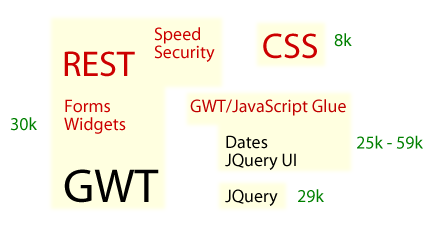
<style>
.page{position:relative;width:431px;height:244px;background:#ffffff}
.page>*{position:absolute;margin:0}
.t1{font:18px "MyriadPro-Regular";color:#cc0000}
.t2{font:36px "MyriadPro-Regular";color:#cc0000}
.t3{font:18px "MyriadPro-Regular";color:#008000}
.t4{font:18px "MyriadPro-Regular";color:#c00000}
.t5{font:18px "MyriadPro-Regular";color:#000000}
.t6{font:48px "MyriadPro-Regular";color:#000000}
</style>
<div class="page">
<p class="t1" style="left:154px;top:27px;width:46px;height:17px">Speed</p>
<p class="t2" style="left:263px;top:33px;width:54px;height:26px">CSS</p>
<p class="t3" style="left:334px;top:33px;width:18px;height:14px">8k</p>
<p class="t2" style="left:64px;top:51px;width:71px;height:26px">REST</p>
<p class="t1" style="left:154px;top:45px;width:61px;height:17px">Security</p>
<p class="t1" style="left:65px;top:99px;width:45px;height:14px">Forms</p>
<p class="t4" style="left:190px;top:99px;width:156px;height:17px">GWT/JavaScript Glue</p>
<p class="t3" style="left:10px;top:117px;width:27px;height:14px">30k</p>
<p class="t1" style="left:64px;top:117px;width:62px;height:17px">Widgets</p>
<p class="t5" style="left:226px;top:135px;width:42px;height:14px">Dates</p>
<p class="t3" style="left:357px;top:135px;width:66px;height:14px">25k - 59k</p>
<p class="t5" style="left:225px;top:153px;width:71px;height:17px">JQuery UI</p>
<p class="t6" style="left:64px;top:169px;width:95px;height:34px">GWT</p>
<p class="t5" style="left:225px;top:189px;width:53px;height:17px">JQuery</p>
<p class="t3" style="left:298px;top:189px;width:26px;height:14px">29k</p>
</div>
